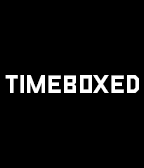
<style>
.page{position:relative;width:144px;height:168px;background:#000000}
.page>*{position:absolute;margin:0}
.t1{font:25px "LECO1976-Regular";color:#ffffff}
</style>
<div class="page">
<p class="t1" style="left:5px;top:75px;width:134px;height:18px">TIMEBOXED</p>
</div>
